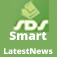
<style>
.page{position:relative;width:57px;height:57px;background:#7cad5d}
.page>*{position:absolute;margin:0}
.t1{font:8px/14px "OpenSans-Extrabold";color:#ffffff}
.t2{font:12px/14px "OpenSans-Extrabold";color:#ffffff}
</style>
<div class="page">
<p class="t1" style="left:4px;top:31px;width:49px;height:23px;text-align:center"><span class="t2">Smart<br></span>LatestNews</p>
</div>
